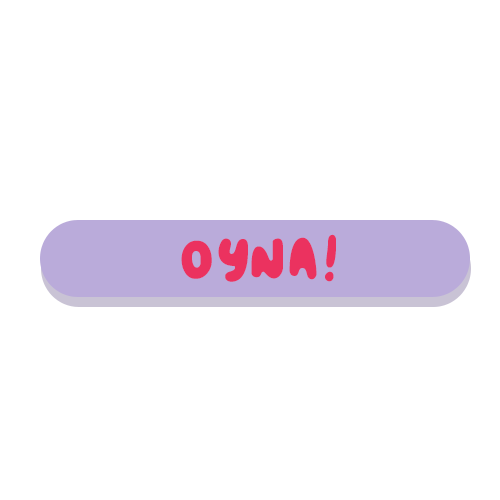
<style>
.page{position:relative;width:500px;height:500px;background:#ffffff}
.page>*{position:absolute;margin:0}
.t1{font:62.1px "BomberBalloon";letter-spacing:0.08em;color:#eb325f}
</style>
<div class="page">
<p class="t1" style="left:181px;top:234px;width:155px;height:48px">OYNA!</p>
</div>
